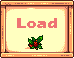
<style>
.page{position:relative;width:74px;height:58px;background:#ffffc0}
.page>*{position:absolute;margin:0}
.t1{font:15.4px "ErasITC-Bold";letter-spacing:-0.03em;color:#ef7373;scale:1.13 1}
</style>
<div class="page">
<p class="t1" style="left:17px;top:18px;width:40px;height:10px">Load</p>
<p class="t1" style="left:17px;top:18px;width:40px;height:10px">Load</p>
</div>
